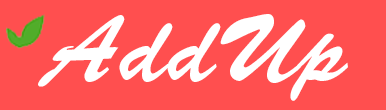
<style>
.page{position:relative;width:386px;height:110px;background:#ff4f4f}
.page>*{position:absolute;margin:0}
.t1{font:96.3px "BrushScriptStd";color:#ffffff}
</style>
<div class="page">
<p class="t1" style="left:38px;top:14px;width:310px;height:87px">AddUp</p>
</div>
